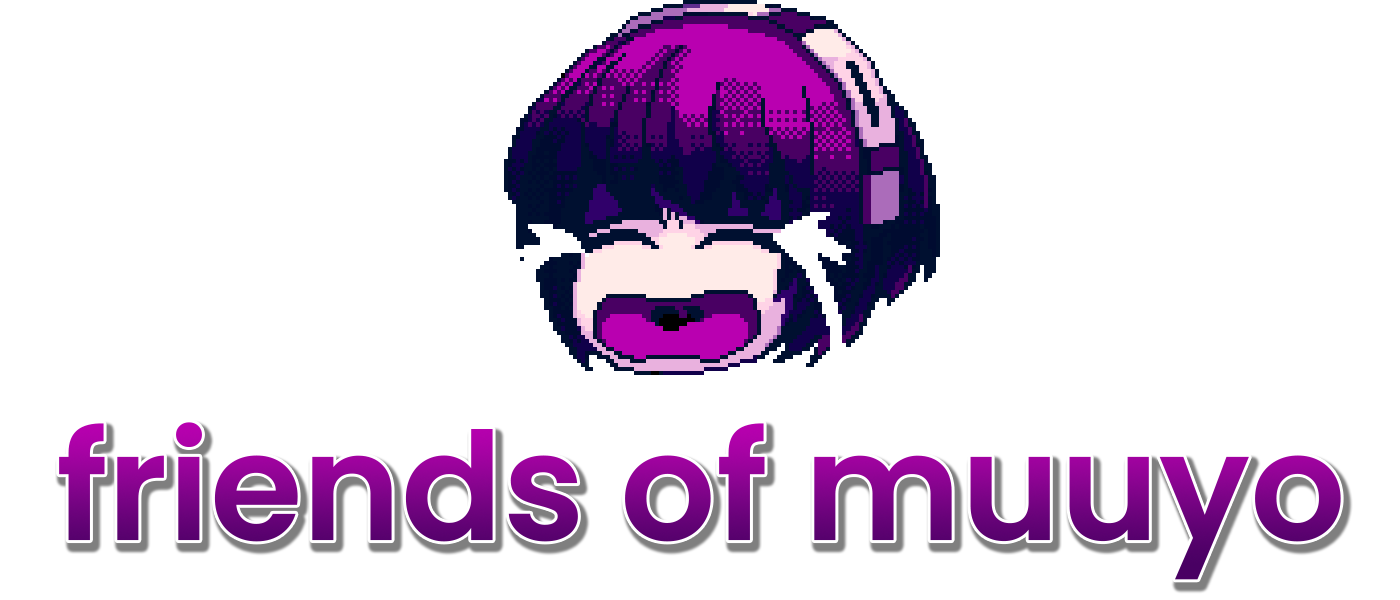
<style>
.page{position:relative;width:1400px;height:600px;background:#ffffff}
.page>*{position:absolute;margin:0}
.t1{font:150px "Poppins-SemiBold"}
</style>
<div class="page">
<p class="t1" style="left:59px;top:422px;width:1282px;height:158px">friends of muuyo</p>
</div>
